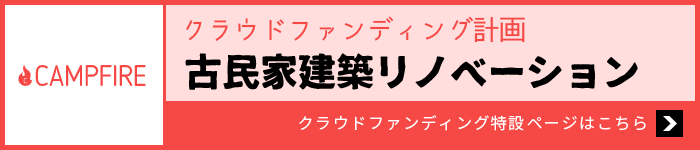
<style>
.page{position:relative;width:700px;height:150px;background:#ffdedd}
.page>*{position:absolute;margin:0}
.t1{font:28px "komorebi-gothic";letter-spacing:-0.05em;color:#f64945}
.t2{font:38px "07TetsubinGothic";color:#000000}
.t3{font:16px "SourceHanSansJP-Regular";letter-spacing:0.1em;color:#ffffff}
</style>
<div class="page">
<p class="t1" style="left:186px;top:16px;width:339px;height:27px">クラウドファンディング計画</p>
<p class="t2" style="left:185px;top:53px;width:453px;height:37px">古民家建築リノベーション</p>
<p class="t3" style="left:299px;top:115px;width:347px;height:16px">クラウドファンディング特設ページはこちら</p>
</div>
